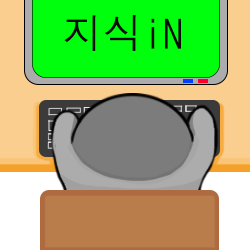
<style>
.page{position:relative;width:250px;height:250px;background:#00ff0d}
.page>*{position:absolute;margin:0}
.t1{font:41.2px "DotumChe";color:#0b0b0b}
</style>
<div class="page">
<p class="t1" style="left:64px;top:15px;width:117px;height:36px">지식iN</p>
</div>
